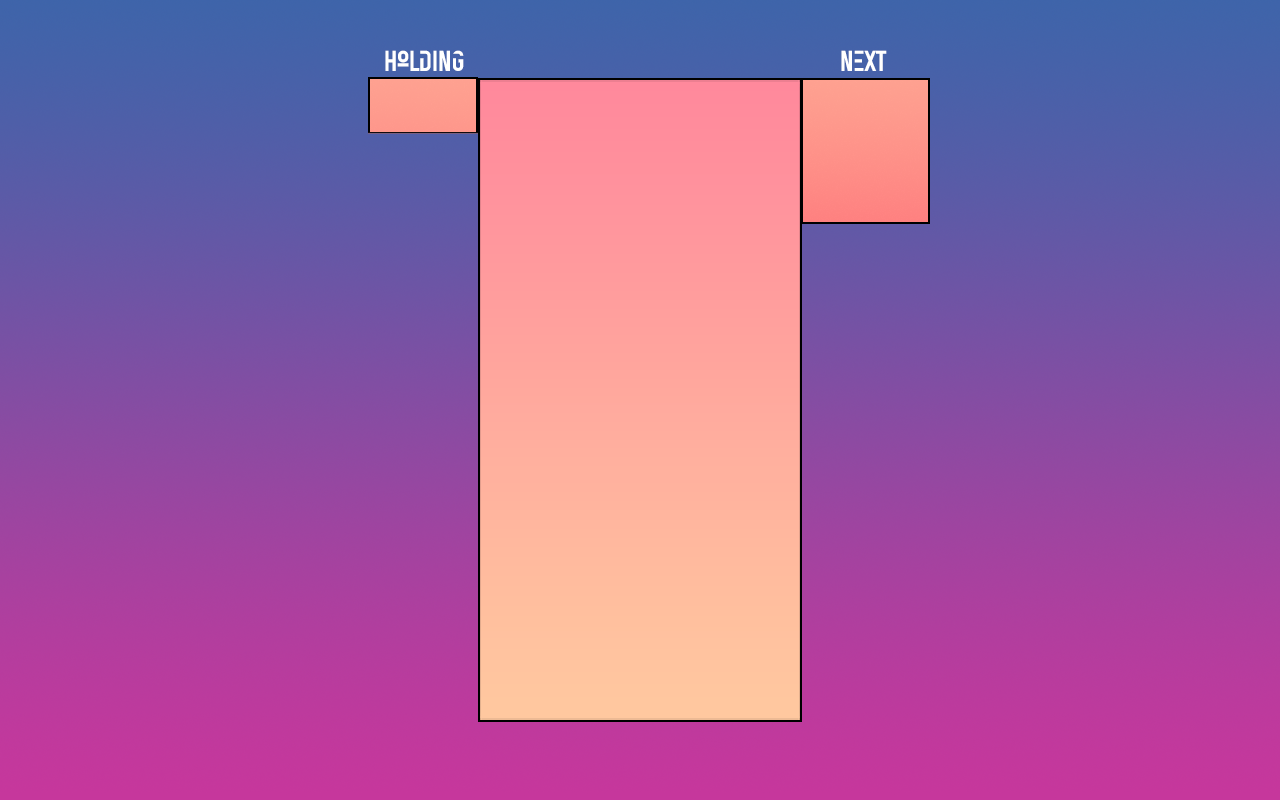
<style>
.page{position:relative;width:1280px;height:800px}
.page>*{position:absolute;margin:0}
.t1{font:29px "TacticoRegular";color:#ffffff}
</style>
<div class="page">
<p class="t1" style="left:385px;top:50px;width:79px;height:21px">Holding</p>
<p class="t1" style="left:841px;top:50px;width:46px;height:21px">next</p>
</div>
